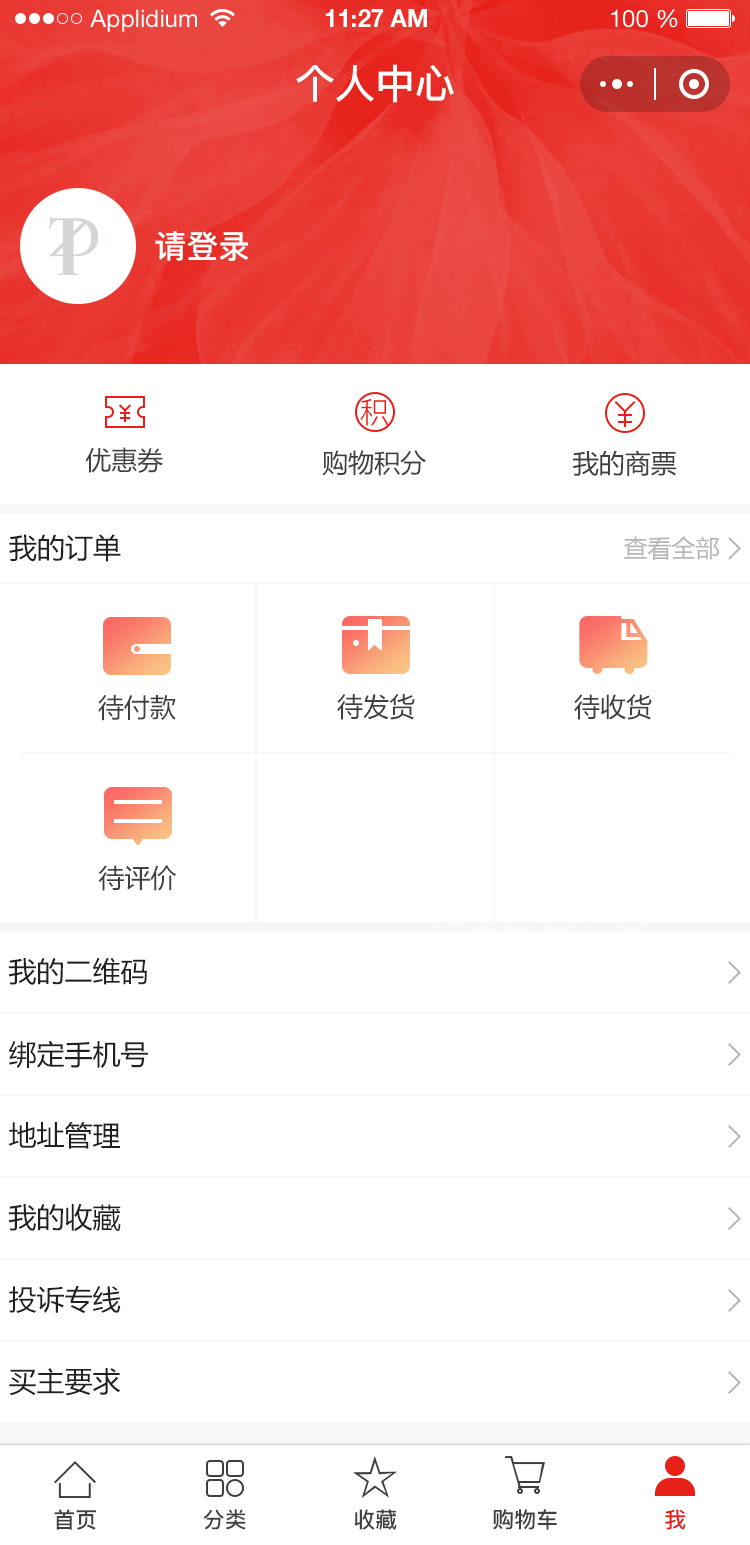
<style>
.page{position:relative;width:750px;height:1545px;background:#ffffff}
.page>*{position:absolute;margin:0}
.t1{font:24px "HelveticaNeueLTStd-Roman";color:#ffffff}
.t2{font:24px "HelveticaNeueLTStd-Bd";color:#ffffff}
.t3{font:40px "PingFang-SC-Bold";color:#ffffff;text-transform:uppercase}
.t4{font:32px "PingFang-SC-Bold";color:#ffffff;text-transform:uppercase}
.t5{font:26px "MicrosoftYaHei";color:#404040;text-transform:uppercase}
.t6{font:28px "MicrosoftYaHei";color:#202020;text-transform:uppercase}
.t7{font:24px "MicrosoftYaHei";color:#b6b6b6;text-transform:uppercase}
.t8{font:22px "PingFang-SC-Bold";color:#404040;text-transform:uppercase}
.t9{font:22px "PingFang-SC-Bold";color:#e61f18;text-transform:uppercase}
</style>
<div class="page">
<p class="t1" style="left:90px;top:9px;width:107px;height:23px">Applidium</p>
<p class="t2" style="left:325px;top:9px;width:102px;height:18px">11:27 AM</p>
<p class="t1" style="left:611px;top:9px;width:67px;height:19px">100 %</p>
<p class="t3" style="left:296px;top:64px;width:158px;height:39px">个人中心</p>
<p class="t4" style="left:155px;top:231px;width:93px;height:30px">请登录</p>
<p class="t5" style="left:85px;top:447px;width:78px;height:26px">优惠券</p>
<p class="t5" style="left:322px;top:450px;width:104px;height:26px">购物积分</p>
<p class="t5" style="left:573px;top:450px;width:104px;height:26px">我的商票</p>
<p class="t6" style="left:9px;top:534px;width:112px;height:28px">我的订单</p>
<p class="t7" style="left:624px;top:536px;width:95px;height:24px">查看全部</p>
<p class="t5" style="left:98px;top:694px;width:78px;height:27px">待付款</p>
<p class="t5" style="left:337px;top:693px;width:78px;height:27px">待发货</p>
<p class="t5" style="left:574px;top:694px;width:78px;height:26px">待收货</p>
<p class="t5" style="left:98px;top:865px;width:78px;height:26px">待评价</p>
<p class="t6" style="left:8px;top:957px;width:139px;height:28px">我的二维码</p>
<p class="t6" style="left:9px;top:1040px;width:139px;height:28px">绑定手机号</p>
<p class="t6" style="left:8px;top:1122px;width:112px;height:27px">地址管理</p>
<p class="t6" style="left:8px;top:1203px;width:113px;height:29px">我的收藏</p>
<p class="t6" style="left:9px;top:1286px;width:112px;height:28px">投诉专线</p>
<p class="t6" style="left:9px;top:1368px;width:112px;height:28px">买主要求</p>
<p class="t8" style="left:54px;top:1509px;width:42px;height:21px">首页</p>
<p class="t8" style="left:203px;top:1509px;width:43px;height:21px">分类</p>
<p class="t8" style="left:354px;top:1509px;width:43px;height:21px">收藏</p>
<p class="t8" style="left:493px;top:1509px;width:64px;height:21px">购物车</p>
<p class="t9" style="left:665px;top:1509px;width:21px;height:21px">我</p>
</div>
